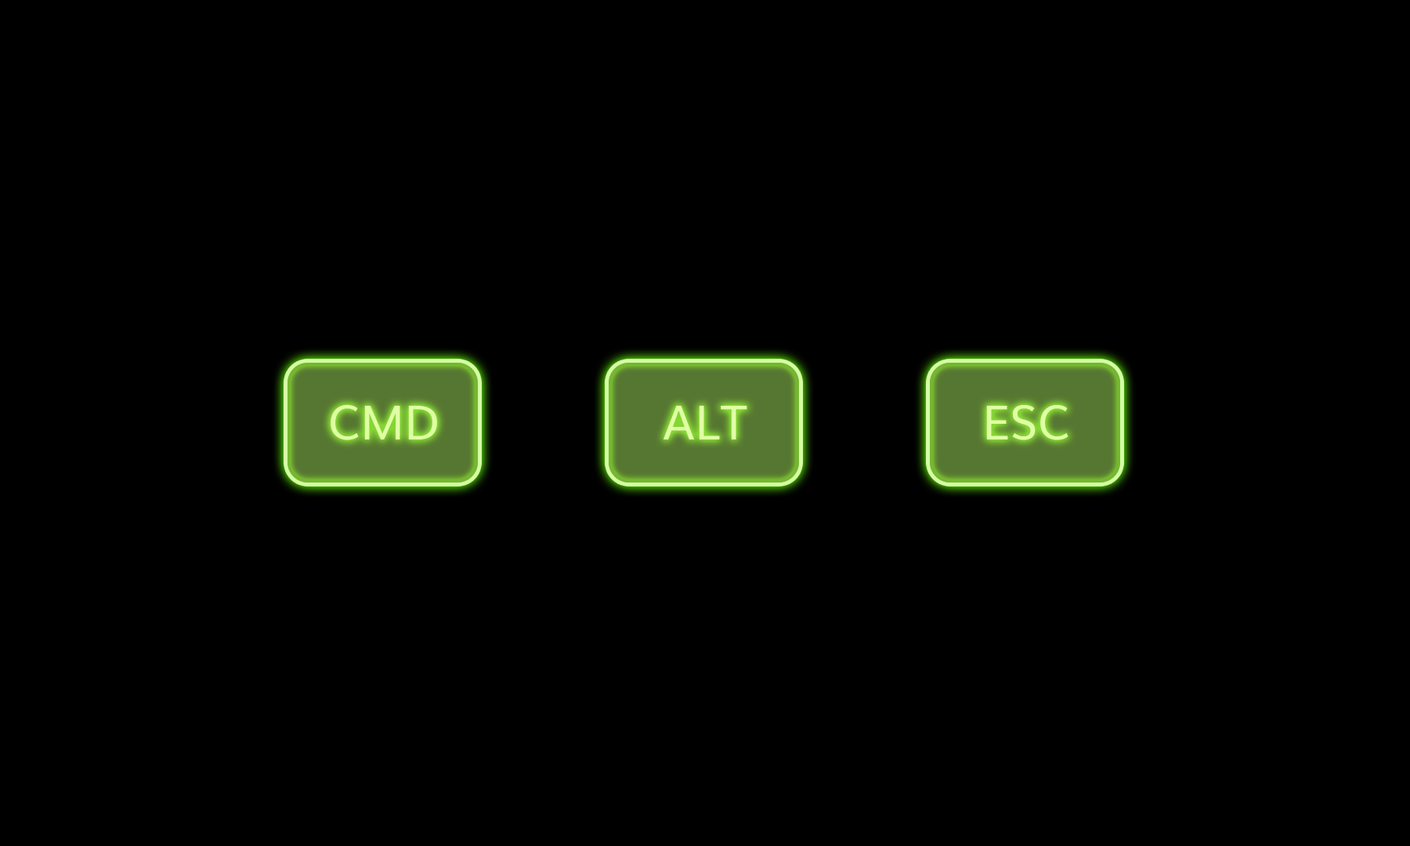
<style>
.page{position:relative;width:1410px;height:846px;background:#000000}
.page>*{position:absolute;margin:0}
.t1{font:47px "Muli";color:#d5ffa4}
</style>
<div class="page">
<p class="t1" style="left:331px;top:405px;width:106px;height:35px">CMD</p>
<p class="t1" style="left:663px;top:406px;width:84px;height:33px">ALT</p>
<p class="t1" style="left:986px;top:405px;width:82px;height:35px">ESC</p>
</div>
